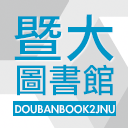
<style>
.page{position:relative;width:128px;height:128px;background:#0096c7}
.page>*{position:absolute;margin:0}
.t1{font:51px "LiGothicMed";letter-spacing:0.025em;color:#0096c7}
.t2{font:33px "LiGothicMed";letter-spacing:0.025em;color:#0096c7}
.t3{font:13px "LiGothicMed";letter-spacing:0.025em;color:#ffffff}
</style>
<div class="page">
<p class="t1" style="left:14px;top:14px;width:100px;height:48px">暨大</p>
<p class="t2" style="left:17px;top:64px;width:97px;height:32px">圖書館</p>
<p class="t3" style="left:15px;top:105px;width:100px;height:9px">DOUBANBOOK2JNU</p>
</div>
